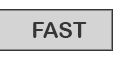
<style>
.page{position:relative;width:120px;height:60px;background:#d4d4d4}
.page>*{position:absolute;margin:0}
.t1{font:21.6px "ArialRoundedMTBold";color:#363636}
</style>
<div class="page">
<p class="t1" style="left:33px;top:22px;width:54px;height:16px">FAST</p>
</div>
